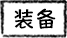
<style>
.page{position:relative;width:67px;height:38px;background:#ffffff}
.page>*{position:absolute;margin:0}
.t1{font:21.1px "HannotateSC-W7";letter-spacing:0.055em;color:#000000}
</style>
<div class="page">
<p class="t1" style="left:14px;top:8px;width:42px;height:21px">装备</p>
</div>
